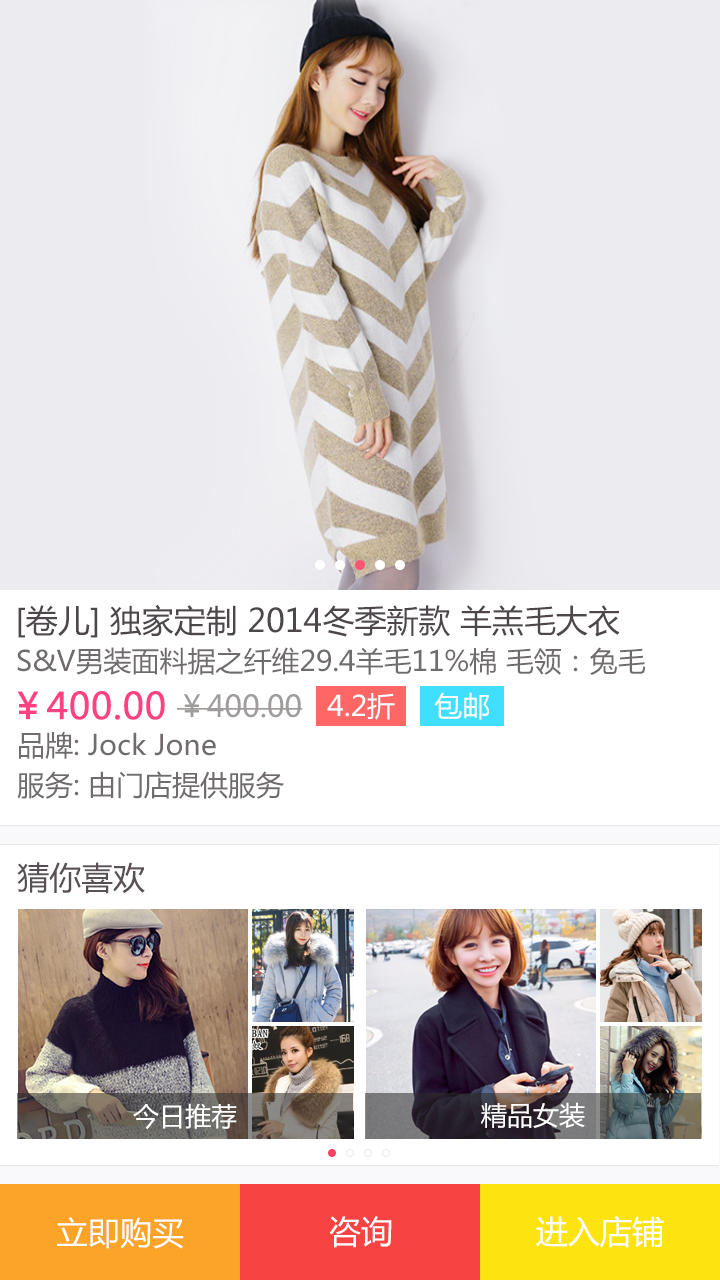
<style>
.page{position:relative;width:720px;height:1280px;background:#ecebf0}
.page>*{position:absolute;margin:0}
.t1{font:32px "MicrosoftYaHei";color:#4d464b}
.t2{font:28px "MicrosoftYaHei";color:#706b6e}
.t3{font:36px "MicrosoftYaHei";color:#ff4181;font-weight:bold}
.t4{font:30px "MicrosoftYaHei";color:#a09c9c}
.t5{font:28px "MicrosoftYaHei";color:#ffffff}
.t6{font:32px "MicrosoftYaHei";color:#595056}
.t7{font:26px "MicrosoftYaHei";color:#ffffff}
.t8{font:32px "MicrosoftYaHei";color:#ffffff}
</style>
<div class="page">
<p class="t1" style="left:18px;top:604px;width:602px;height:34px">[卷儿] 独家定制 2014冬季新款 羊羔毛大衣</p>
<p class="t2" style="left:17px;top:647px;width:629px;height:28px">S&amp;V男装面料据之纤维29.4羊毛11%棉 毛领：兔毛</p>
<p class="t3" style="left:17px;top:691px;width:148px;height:29px">￥400.00</p>
<p class="t4" style="left:177px;top:694px;width:126px;height:24px">￥400.00</p>
<p class="t5" style="left:327px;top:693px;width:68px;height:27px">4.2折</p>
<p class="t5" style="left:434px;top:692px;width:55px;height:28px">包邮</p>
<p class="t2" style="left:19px;top:731px;width:197px;height:28px">品牌: Jock Jone</p>
<p class="t2" style="left:17px;top:771px;width:267px;height:28px">服务: 由门店提供服务</p>
<p class="t6" style="left:17px;top:862px;width:128px;height:32px">猜你喜欢</p>
<p class="t7" style="left:133px;top:1103px;width:104px;height:27px">今日推荐</p>
<p class="t7" style="left:481px;top:1102px;width:104px;height:26px">精品女装</p>
<p class="t8" style="left:57px;top:1217px;width:127px;height:32px">立即购买</p>
<p class="t8" style="left:329px;top:1216px;width:63px;height:32px">咨询</p>
<p class="t8" style="left:536px;top:1216px;width:128px;height:32px">进入店铺</p>
</div>
